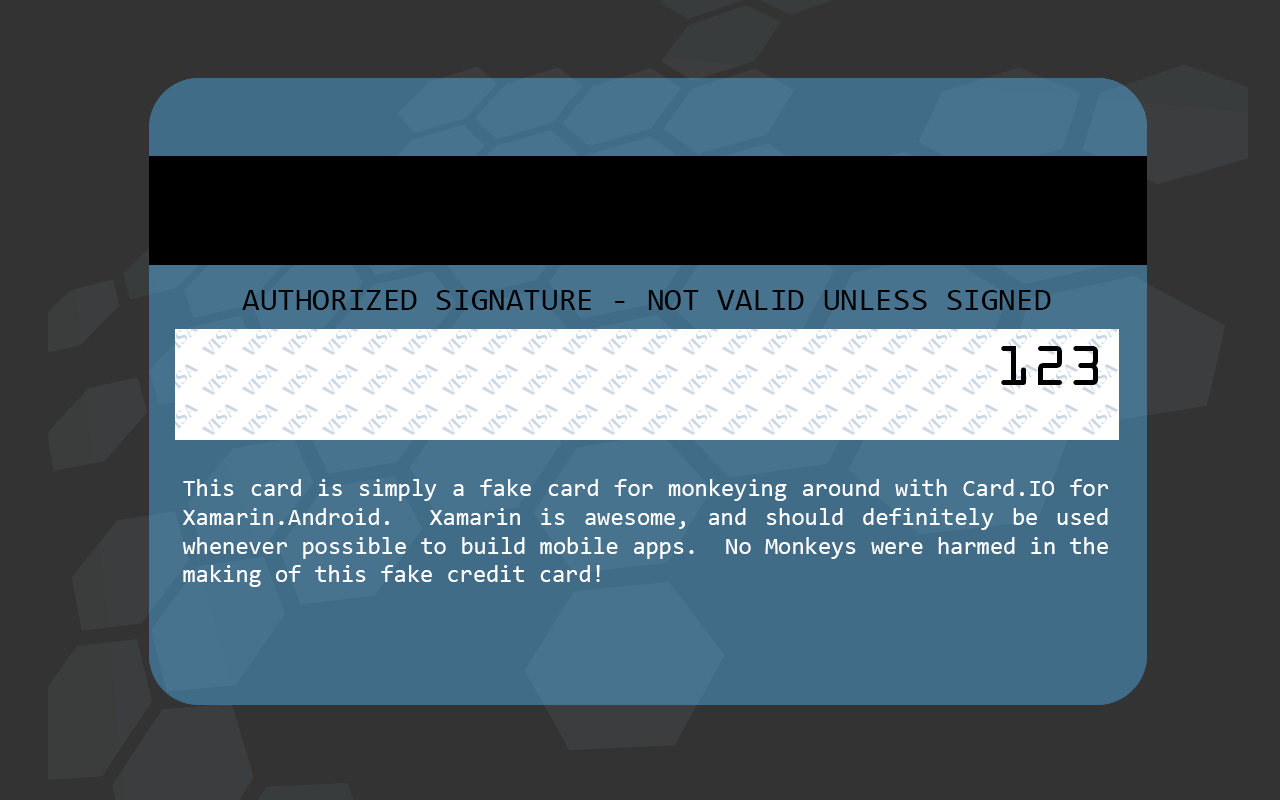
<style>
.page{position:relative;width:1280px;height:800px;background:#333333}
.page>*{position:absolute;margin:0}
.t1{font:32px "Consolas";color:#000000}
.t2{font:50px "OCRAStd";color:#000000}
.t3{font:24px "Consolas";color:#ffffff}
</style>
<div class="page">
<p class="t1" style="left:242px;top:290px;width:809px;height:20px">AUTHORIZED SIGNATURE - NOT VALID UNLESS SIGNED</p>
<p class="t2" style="left:1001px;top:346px;width:97px;height:39px">123</p>
<p class="t3" style="left:182px;top:479px;width:927px;height:108px;text-align:justify">This card is simply a fake card for monkeying around with Card.IO for Xamarin.Android.  Xamarin is awesome, and should definitely be used whenever possible to build mobile apps.  No Monkeys were harmed in the making of this fake credit card!</p>
</div>
